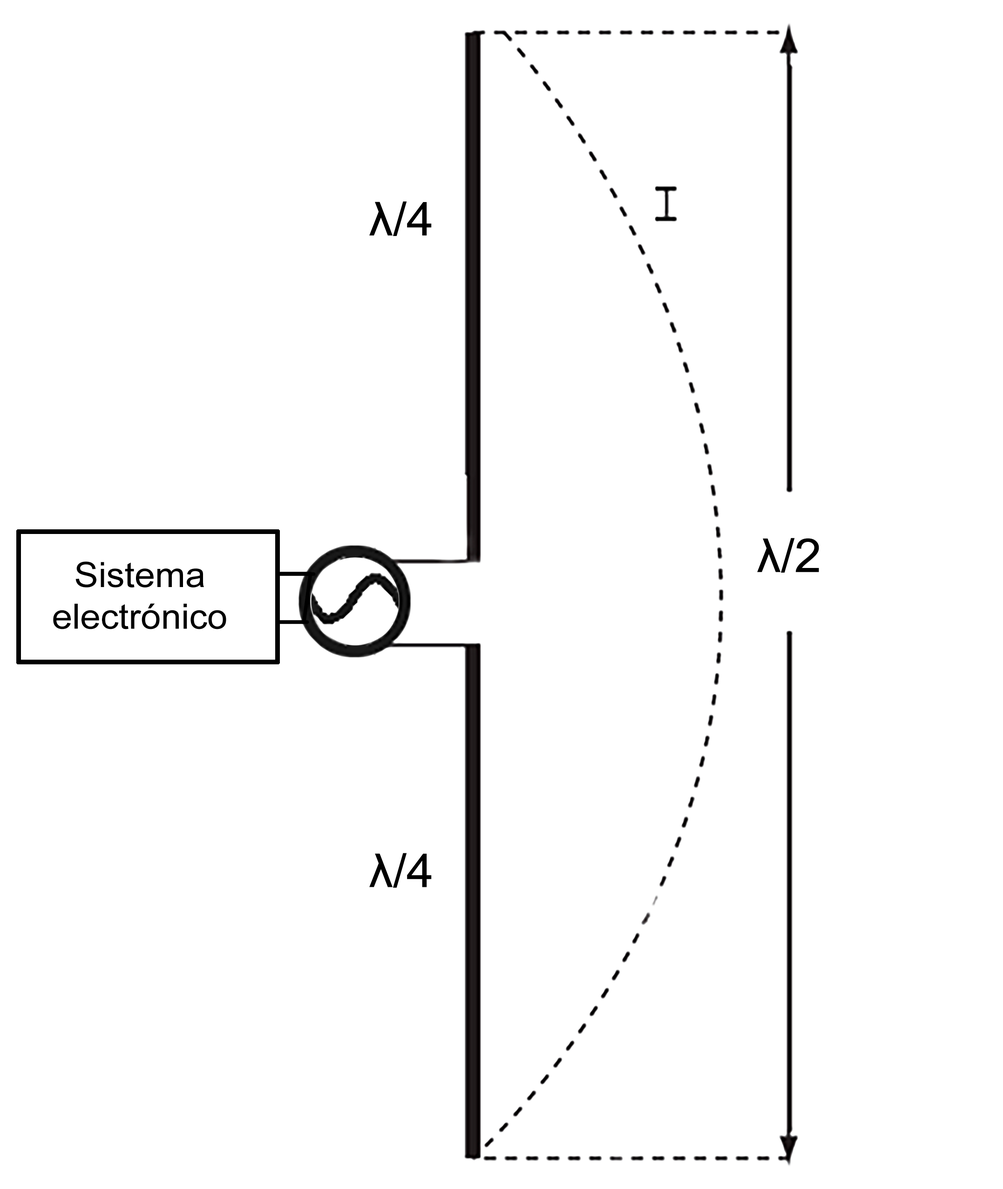
<style>
.page{position:relative;width:1003px;height:1189px;background:#ffffff}
.page>*{position:absolute;margin:0}
.t1{font:46.6px "ArialMT";color:#000000;scale:1.04 1}
.t2{font:34.9px/41.6px "ArialMT";color:#000000;scale:1.04 1}
</style>
<div class="page">
<p class="t1" style="left:369px;top:201px;width:63px;height:35px">λ/4</p>
<p class="t1" style="left:757px;top:538px;width:62px;height:35px">λ/2</p>
<p class="t2" style="left:53px;top:561px;width:173px;height:68px;text-align:center">Sistema <br>electrónico</p>
<p class="t1" style="left:369px;top:853px;width:63px;height:35px">λ/4</p>
</div>
